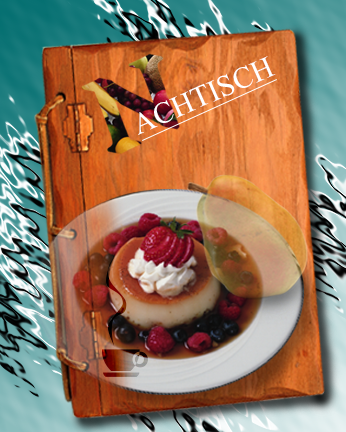
<style>
.page{position:relative;width:346px;height:432px}
.page>*{position:absolute;margin:0}
.t1{font:30px "TimesNewRomanPSMT";color:#ffffff}
</style>
<div class="page">
<p class="t1" style="left:138px;top:56px;width:138px;height:79px;rotate:-24deg">ACHTISCH</p>
</div>
